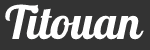
<style>
.page{position:relative;width:150px;height:50px;background:#333333}
.page>*{position:absolute;margin:0}
.t1{font:46px "Galada-Regular";color:#ffffff}
</style>
<div class="page">
<p class="t1" style="left:5px;top:4px;width:139px;height:36px">Titouan</p>
</div>
